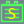
<style>
.page{position:relative;width:24px;height:24px;background:#67a27e}
.page>*{position:absolute;margin:0}
.t1{font:18px "Calibri";color:#fef503}
</style>
<div class="page">
<p class="t1" style="left:8px;top:8px;width:8px;height:11px">S</p>
</div>
